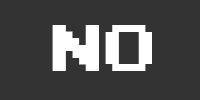
<style>
.page{position:relative;width:200px;height:100px;background:#333333}
.page>*{position:absolute;margin:0}
.t1{font:52.7px "Emulogic";color:#ffffff}
</style>
<div class="page">
<p class="t1" style="left:52px;top:25px;width:100px;height:46px">NO</p>
</div>
